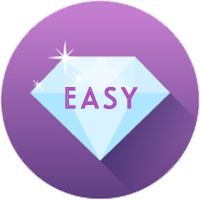
<style>
.page{position:relative;width:200px;height:200px;background:#ffffff}
.page>*{position:absolute;margin:0}
.t1{font:28.7px "Landmark-Inline";letter-spacing:0.1em;color:#ab53bb;font-weight:bold}
</style>
<div class="page">
<p class="t1" style="left:65px;top:86px;width:73px;height:24px">EASY</p>
</div>
